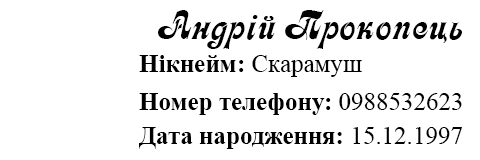
<style>
.page{position:relative;width:480px;height:160px;background:#ffffff}
.page>*{position:absolute;margin:0}
.t1{font:41.7px "Asessor";color:#000000}
.t2{font:25px "TimesNewRomanPS-BoldMT";color:#000000}
.t3{font:25px "TimesNewRomanPSMT";color:#000000}
</style>
<div class="page">
<p class="t1" style="left:158px;top:10px;width:304px;height:39px">Андрій Прокопець</p>
<p class="t2" style="left:139px;top:55px;width:223px;height:22px">Нікнейм: <span class="t3">Скарамуш</span></p>
<p class="t2" style="left:139px;top:93px;width:323px;height:22px">Номер телефону: <span class="t3">0988532623</span></p>
<p class="t2" style="left:139px;top:127px;width:323px;height:22px">Дата народження: <span class="t3">15.12.1997</span></p>
</div>
